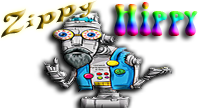
<style>
.page{position:relative;width:200px;height:108px;background:#ffffff}
.page>*{position:absolute;margin:0}
.t1{font:33.1px "DeltaHeyMaxNine-Regular";scale:1.27 1}
.t2{font:38px "BellybeansFG"}
</style>
<div class="page">
<p class="t1" style="left:1px;top:0px;width:96px;height:38px;rotate:-18deg">Zippy</p>
<p class="t2" style="left:114px;top:2px;width:84px;height:34px">Hippy</p>
</div>
